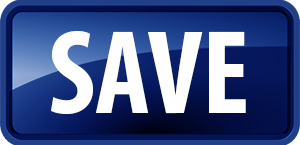
<style>
.page{position:relative;width:300px;height:145px}
.page>*{position:absolute;margin:0}
.t1{font:120px "MyriadPro-BoldCond";color:#ffffff}
</style>
<div class="page">
<p class="t1" style="left:51px;top:30px;width:195px;height:84px">SAVE</p>
</div>
